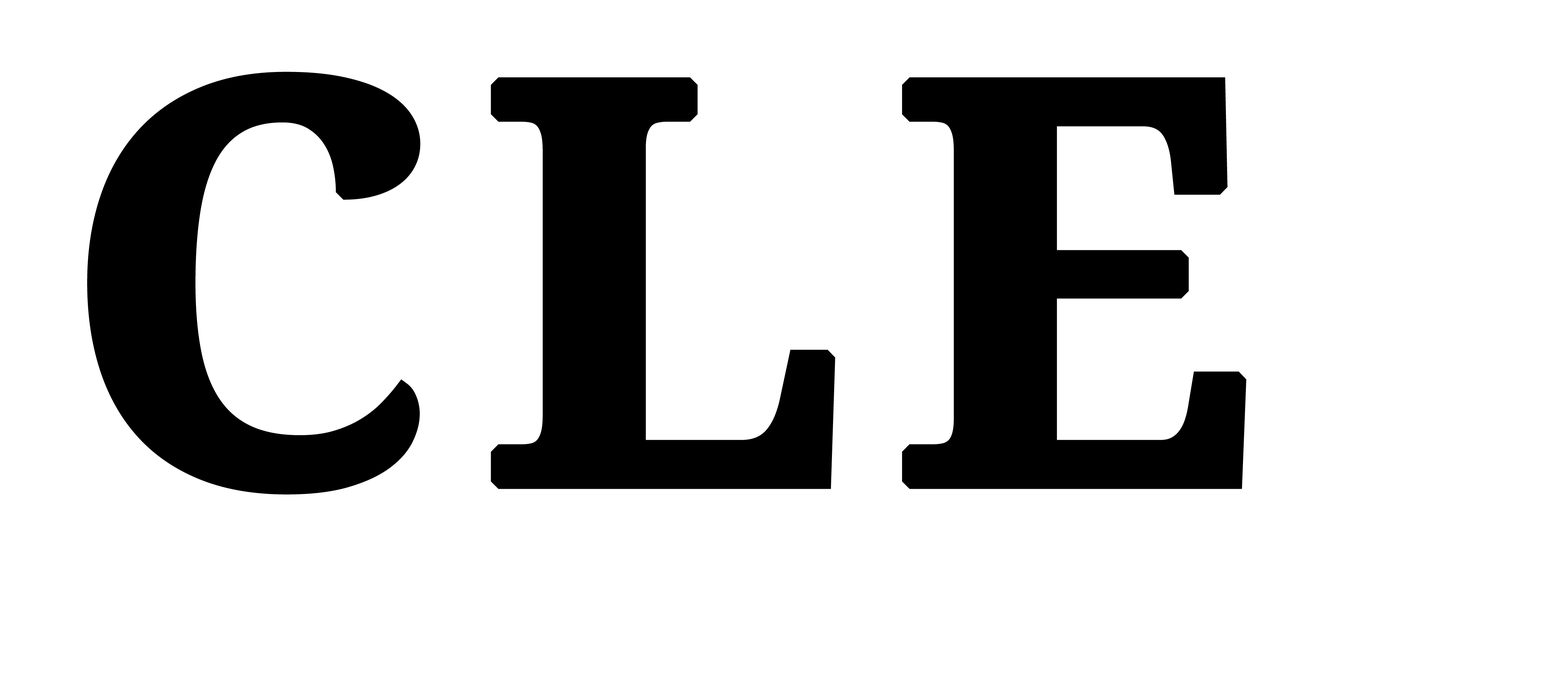
<style>
.page{position:relative;width:1568px;height:694px;background:#ffffff}
.page>*{position:absolute;margin:0}
.t1{font:554.9px "DroidSerif-Bold";letter-spacing:0.06em;color:#000000;font-weight:bold}
</style>
<div class="page">
<p class="t1" style="left:87px;top:72px;width:1159px;height:422px">CLE</p>
</div>
